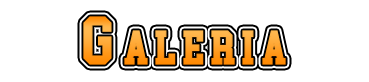
<style>
.page{position:relative;width:369px;height:82px;background:#ffffff}
.page>*{position:absolute;margin:0}
.t1{font:60px "CollegeBlock2.0";letter-spacing:0.15em;font-variant:small-caps}
</style>
<div class="page">
<p class="t1" style="left:83px;top:16px;width:203px;height:49px">Galeria</p>
</div>
